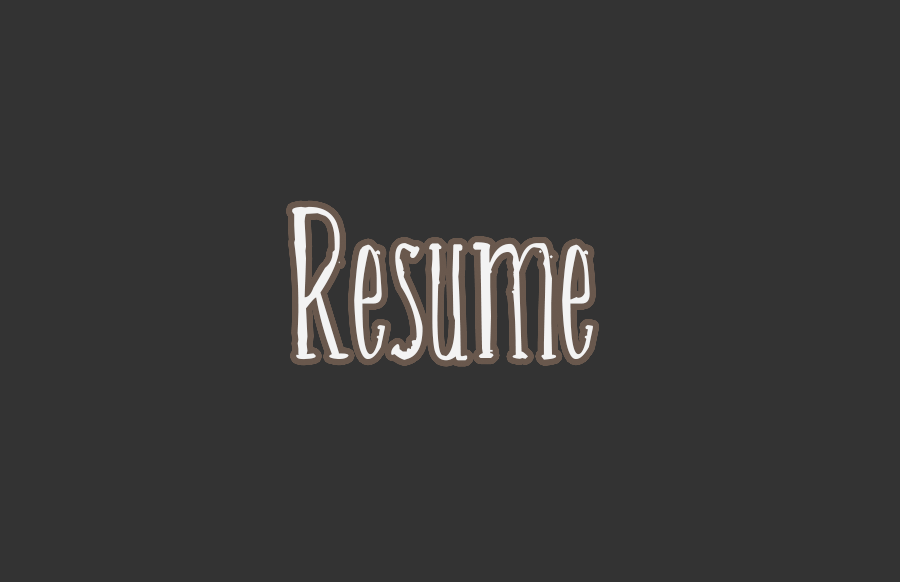
<style>
.page{position:relative;width:900px;height:582px;background:#333333}
.page>*{position:absolute;margin:0}
.t1{font:166.7px "Belisaplumillamanual";color:#f3f3f3}
</style>
<div class="page">
<p class="t1" style="left:292px;top:206px;width:301px;height:155px">Resume</p>
</div>
